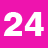
<style>
.page{position:relative;width:48px;height:48px;background:#ee14ae}
.page>*{position:absolute;margin:0}
.t1{font:35.1px "Swiss721BT-Heavy";color:#ffffff}
</style>
<div class="page">
<p class="t1" style="left:3px;top:12px;width:41px;height:24px">24</p>
</div>
